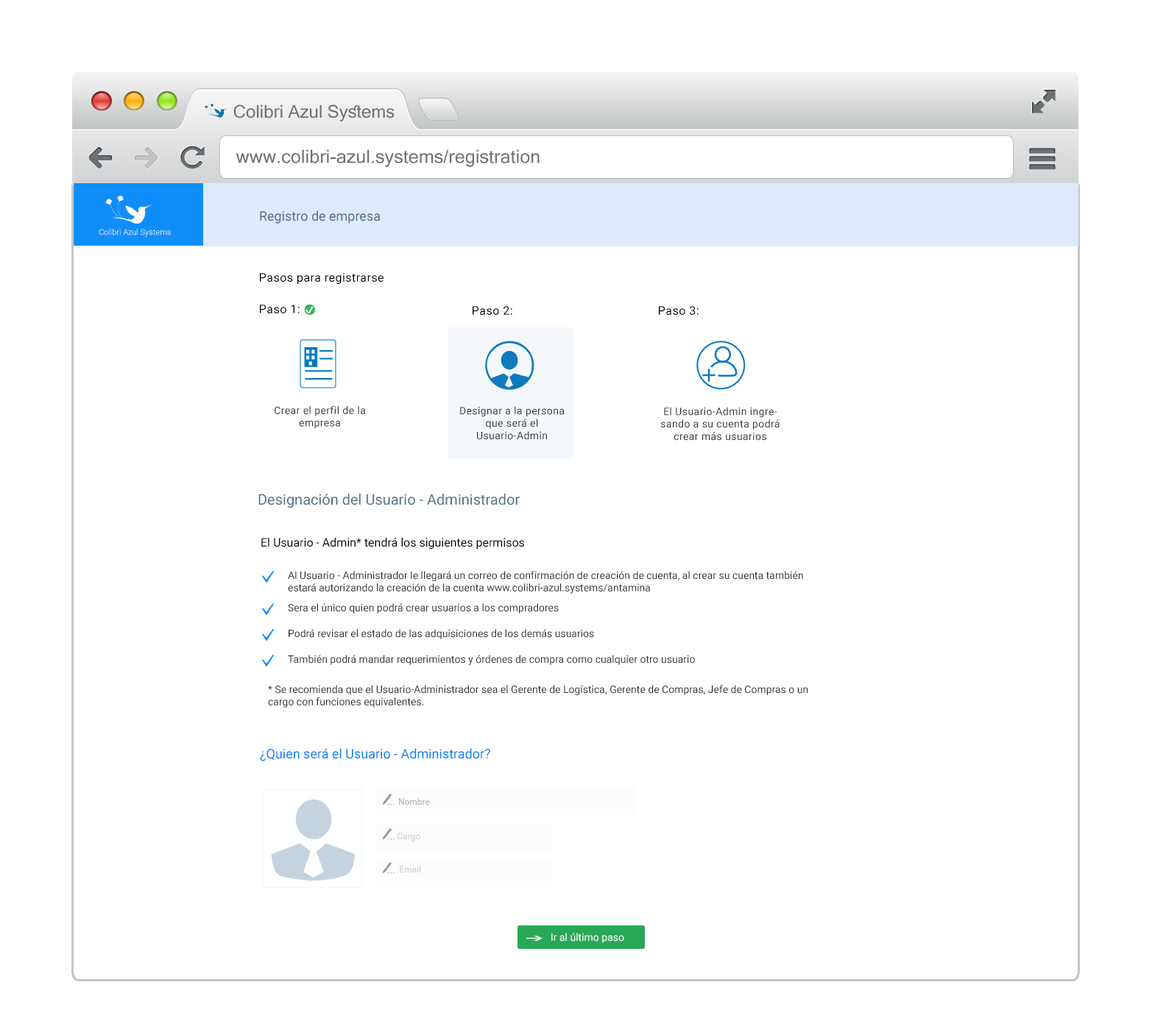
<style>
.page{position:relative;width:1152px;height:1035px;background:#ffffff}
.page>*{position:absolute;margin:0}
.t1{font:17.7px "MicrosoftSansSerif";color:#6b7175}
.t2{font:18.5px "MicrosoftSansSerif";color:#6b7175}
.t3{font:13.2px "Roboto-Regular";color:#557387}
.t4{font:8.1px "Roboto-Light";color:#ffffff}
.t5{font:11.8px "Roboto-Regular";letter-spacing:0.03em;color:#000000}
.t6{font:10.3px "Roboto-Regular";letter-spacing:0.03em;color:#333333}
.t7{font:14.7px "Roboto-Regular";color:#557387}
.t8{font:11.8px "Roboto-Regular";color:#000000}
.t9{font:10.3px "Roboto-Regular";color:#333333}
.t10{font:13.2px "Roboto-Regular";color:#0f83fa}
.t11{font:8.8px "Roboto-Regular";color:#b1bcbe}
.t12{font:8.8px "Roboto-Regular";color:#cdd4d5}
.t13{font:10.3px "Roboto-Regular";color:#ffffff}
</style>
<div class="page">
<p class="t1" style="left:233px;top:104px;width:161px;height:17px">Colibri Azul Systems</p>
<p class="t2" style="left:235px;top:149px;width:304px;height:18px">www.colibri-azul.systems/registration</p>
<p class="t3" style="left:260px;top:210px;width:120px;height:14px">Registro de empresa</p>
<p class="t4" style="left:99px;top:228px;width:72px;height:9px">Colibri Azul Systems</p>
<p class="t5" style="left:260px;top:273px;width:123px;height:11px">Pasos para registrarse</p>
<p class="t5" style="left:260px;top:305px;width:40px;height:8px">Paso 1:</p>
<p class="t5" style="left:472px;top:306px;width:40px;height:9px">Paso 2:</p>
<p class="t5" style="left:659px;top:306px;width:39px;height:9px">Paso 3:</p>
<p class="t6" style="left:274px;top:406px;width:91px;height:23px;text-align:center">Crear el perfil de la empresa</p>
<p class="t6" style="left:460px;top:406px;width:104px;height:34px;text-align:center">Designar a la persona que será el <br>Usuario-Admin</p>
<p class="t6" style="left:661px;top:407px;width:118px;height:34px;text-align:center">El Usuario-Admin ingresando a su cuenta podrá crear más usuarios</p>
<p class="t7" style="left:258px;top:494px;width:262px;height:14px">Designación del Usuario - Administrador</p>
<p class="t8" style="left:261px;top:538px;width:263px;height:12px">El Usuario - Admin* tendrá los siguientes permisos</p>
<p class="t9" style="left:288px;top:571px;width:515px;height:23px;text-align:right">Al Usuario - Administrador le llegará un correo de confirmación de creación de cuenta, al crear su cuenta también estará autorizando la creación de la cuenta www.colibri-azul.systems/antamina</p>
<p class="t9" style="left:288px;top:603px;width:271px;height:11px">Sera el único quien podrá crear usuarios a los compradores</p>
<p class="t9" style="left:288px;top:629px;width:306px;height:10px">Podrá revisar el estado de las adquisiciones de los demás usuarios</p>
<p class="t9" style="left:288px;top:655px;width:407px;height:10px">También podrá mandar requerimientos y órdenes de compra como cualquier otro usuario</p>
<p class="t9" style="left:268px;top:685px;width:540px;height:23px;text-align:right">* Se recomienda que el Usuario-Administrador sea el Gerente de Logística, Gerente de Compras, Jefe de Compras o un <br>cargo con funciones equivalentes.</p>
<p class="t10" style="left:260px;top:748px;width:230px;height:14px">¿Quien será el Usuario - Administrador?</p>
<p class="t11" style="left:398px;top:798px;width:32px;height:7px">Nombre</p>
<p class="t12" style="left:397px;top:833px;width:23px;height:9px">Cargo</p>
<p class="t12" style="left:400px;top:866px;width:21px;height:7px">Email</p>
<p class="t13" style="left:551px;top:933px;width:73px;height:10px">Ir al último paso</p>
</div>
